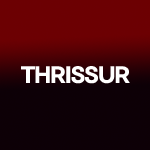
<style>
.page{position:relative;width:150px;height:150px;background:#0d0006}
.page>*{position:absolute;margin:0}
.t1{font:23.6px "UEFASupercup-Bold";letter-spacing:-0.042em;color:#ffffff}
</style>
<div class="page">
<p class="t1" style="left:21px;top:66px;width:109px;height:18px">THRISSUR</p>
</div>
